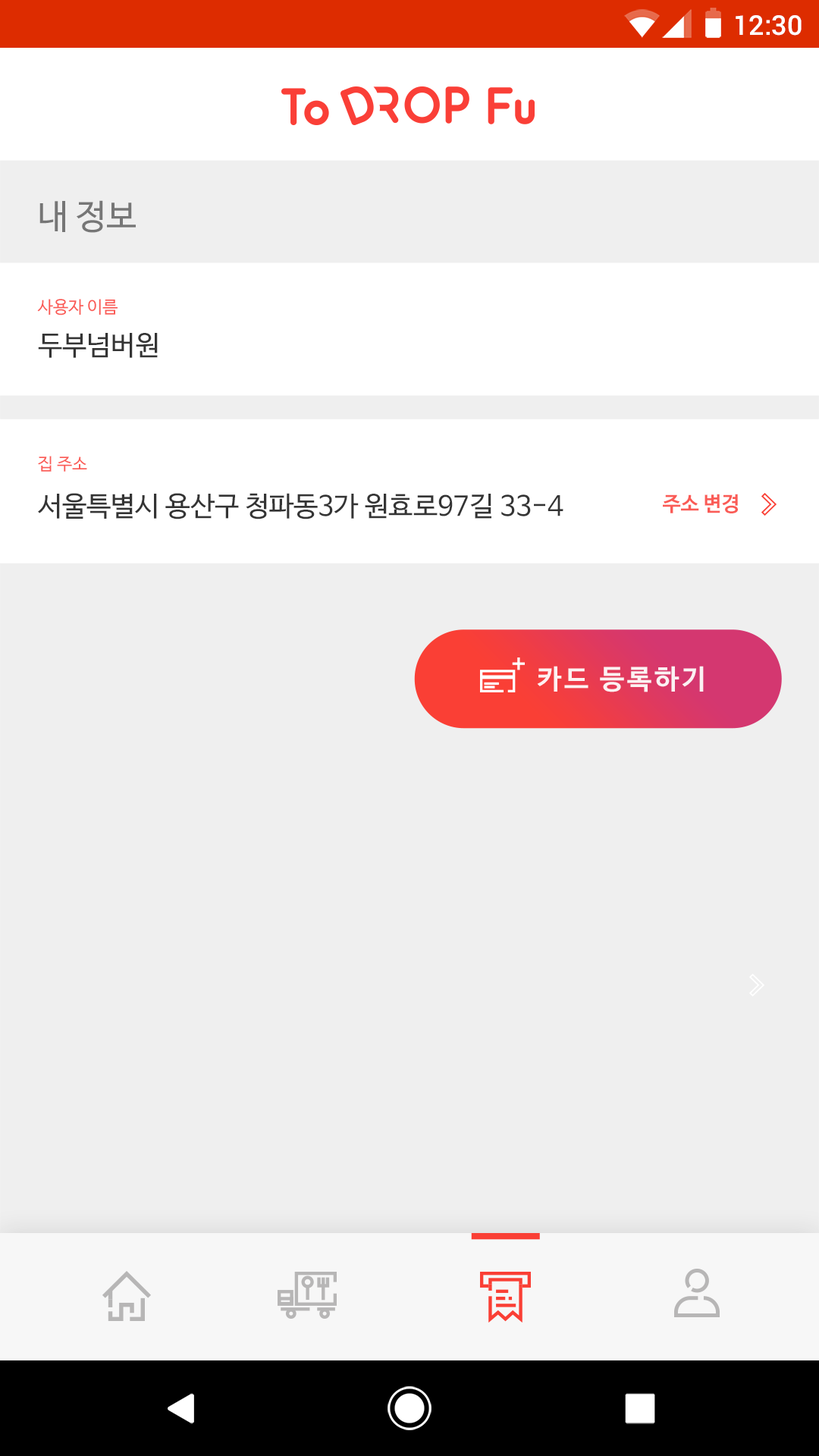
<style>
.page{position:relative;width:819px;height:1456px;background:#efefef}
.page>*{position:absolute;margin:0}
.t1{font:27.3px "Roboto-Medium";color:#ffffff}
.t2{font:34.1px "NanumBarunGothic";color:#656565}
.t3{font:17.1px "NanumBarunGothic";color:#fa5b56}
.t4{font:27.3px "NanumBarunGothic";color:#343434}
.t5{font:20.5px "NanumBarunGothicBold";color:#fa5b56}
.t6{font:27.3px "NanumBarunGothicBold";letter-spacing:0.1em;color:#ffffff}
</style>
<div class="page">
<p class="t1" style="left:736px;top:15px;width:66px;height:21px">12:30</p>
<p class="t2" style="left:39px;top:200px;width:97px;height:33px;opacity:0.9">내 정보</p>
<p class="t3" style="left:37px;top:299px;width:81px;height:16px">사용자 이름</p>
<p class="t4" style="left:38px;top:333px;width:120px;height:25px">두부넘버원</p>
<p class="t3" style="left:38px;top:456px;width:49px;height:16px">집 주소</p>
<p class="t4" style="left:38px;top:493px;width:525px;height:26px">서울특별시 용산구 청파동3가 원효로97길 33-4</p>
<p class="t5" style="left:663px;top:494px;width:75px;height:19px">주소 변경</p>
<p class="t6" style="left:537px;top:666px;width:167px;height:26px;opacity:0.9">카드 등록하기</p>
</div>
